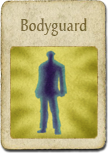
<style>
.page{position:relative;width:112px;height:155px}
.page>*{position:absolute;margin:0}
.t1{font:18px "OdenseCond";color:#7c6d41}
</style>
<div class="page">
<p class="t1" style="left:21px;top:18px;width:66px;height:18px">Bodyguard</p>
<p class="t1" style="left:21px;top:18px;width:66px;height:18px">Bodyguard</p>
</div>
